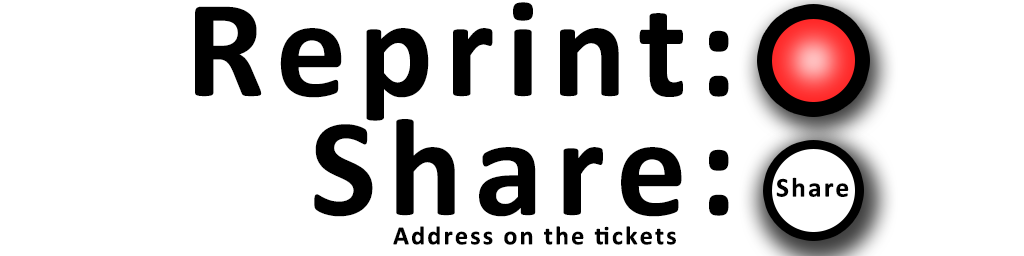
<style>
.page{position:relative;width:1024px;height:256px;background:#ffffff}
.page>*{position:absolute;margin:0}
.t1{font:241px/120px "Calibri-Bold";letter-spacing:0.08em;color:#000000}
.t2{font:241px/119px "Calibri-Bold";letter-spacing:0.08em;color:#000000}
.t3{font:47px "Calibri-Bold";letter-spacing:0.08em;color:#000000}
.t4{font:45px "Calibri-Bold";letter-spacing:0.08em;color:#000000}
</style>
<div class="page">
<p class="t1" style="left:195px;top:2px;width:534px;height:215px;text-align:right">Reprint:<br><span class="t2">Share:</span></p>
<p class="t3" style="left:776px;top:177px;width:73px;height:20px">Share</p>
<p class="t4" style="left:393px;top:226px;width:283px;height:19px">Address on the tickets</p>
</div>
